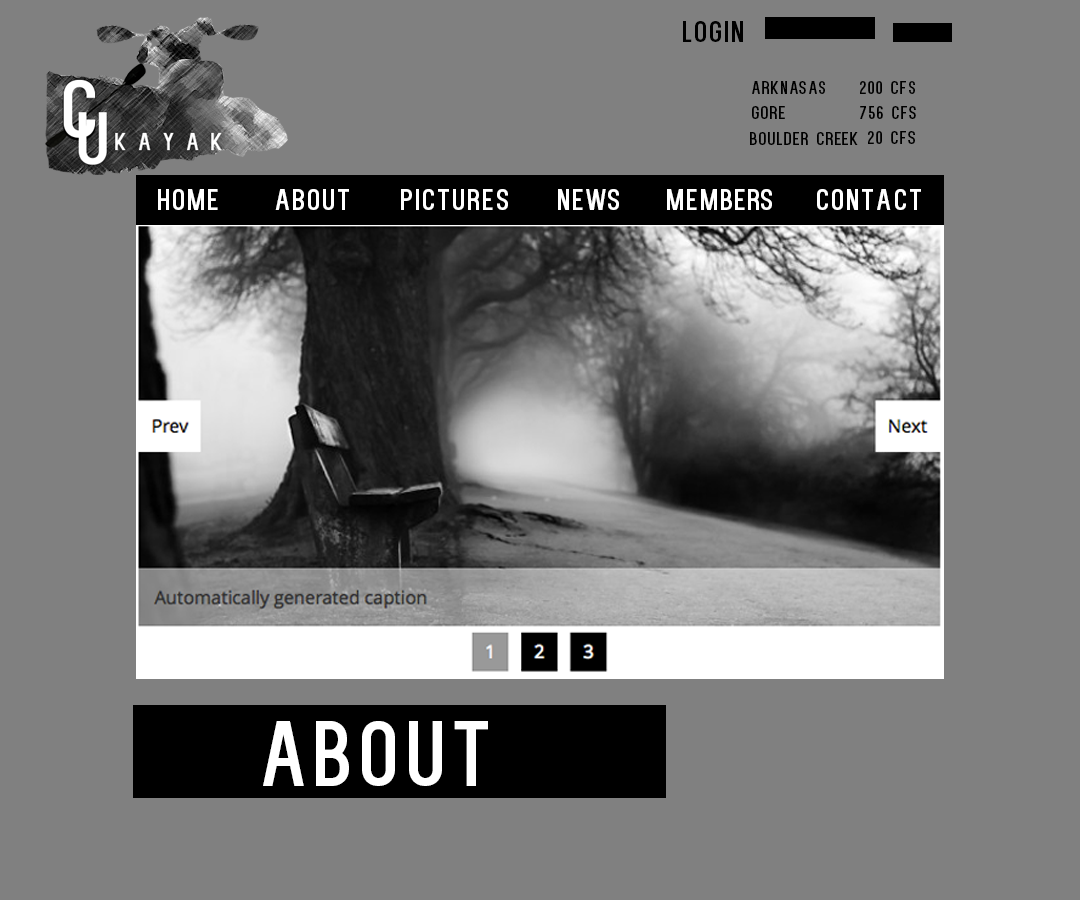
<style>
.page{position:relative;width:1080px;height:900px;background:#808080}
.page>*{position:absolute;margin:0}
.t1{font:30px "Kenzo";letter-spacing:0.08em;color:#000000}
.t2{font:18px "Kenzo";letter-spacing:0.08em;color:#000000}
.t3{font:30px "Kenzo";letter-spacing:0.08em;color:#ffffff}
.t4{font:92.5px "Kenzo";letter-spacing:0.08em;color:#ffffff}
</style>
<div class="page">
<p class="t1" style="left:683px;top:21px;width:60px;height:21px">Login</p>
<p class="t2" style="left:752px;top:81px;width:73px;height:13px">Arknasas</p>
<p class="t2" style="left:860px;top:81px;width:55px;height:13px">200 CFS</p>
<p class="t2" style="left:752px;top:106px;width:33px;height:13px">GORE</p>
<p class="t2" style="left:860px;top:106px;width:56px;height:13px">756 CFS</p>
<p class="t2" style="left:750px;top:132px;width:108px;height:13px">Boulder Creek</p>
<p class="t2" style="left:868px;top:131px;width:47px;height:13px">20 CFS</p>
<p class="t3" style="left:158px;top:189px;width:60px;height:21px">Home</p>
<p class="t3" style="left:275px;top:189px;width:74px;height:21px">About</p>
<p class="t3" style="left:401px;top:189px;width:107px;height:21px">pictures</p>
<p class="t3" style="left:558px;top:189px;width:61px;height:21px">News</p>
<p class="t3" style="left:667px;top:189px;width:105px;height:21px">Members</p>
<p class="t3" style="left:817px;top:189px;width:104px;height:21px">CONtact</p>
<p class="t4" style="left:263px;top:721px;width:225px;height:65px">ABOUT</p>
</div>
